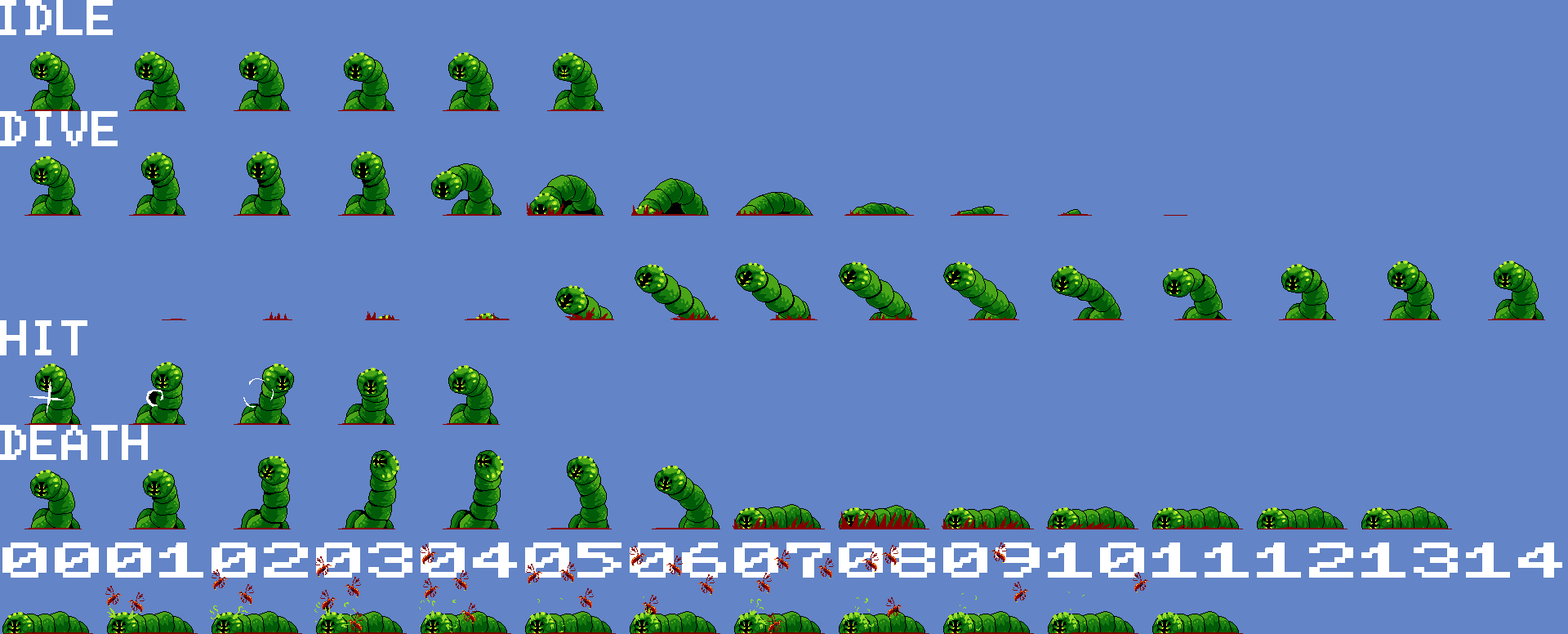
<style>
.page{position:relative;width:1568px;height:634px;background:#6384c6}
.page>*{position:absolute;margin:0}
.t1{font:39.2px "MSX-Screen0";color:#ffffff;text-transform:uppercase;font-weight:bold}
.t2{font:39.2px "MSX-Screen0";color:#ffffff;text-transform:uppercase;font-weight:bold;scale:1.72 1}
</style>
<div class="page">
<p class="t1" style="left:0px;top:0px;width:113px;height:35px">Idle</p>
<p class="t1" style="left:0px;top:111px;width:118px;height:35px">Dive</p>
<p class="t1" style="left:0px;top:320px;width:87px;height:35px">hit</p>
<p class="t1" style="left:0px;top:425px;width:148px;height:35px">death</p>
<p class="t2" style="left:2px;top:542px;width:1560px;height:35px">000102030405060708091011121314</p>
</div>
